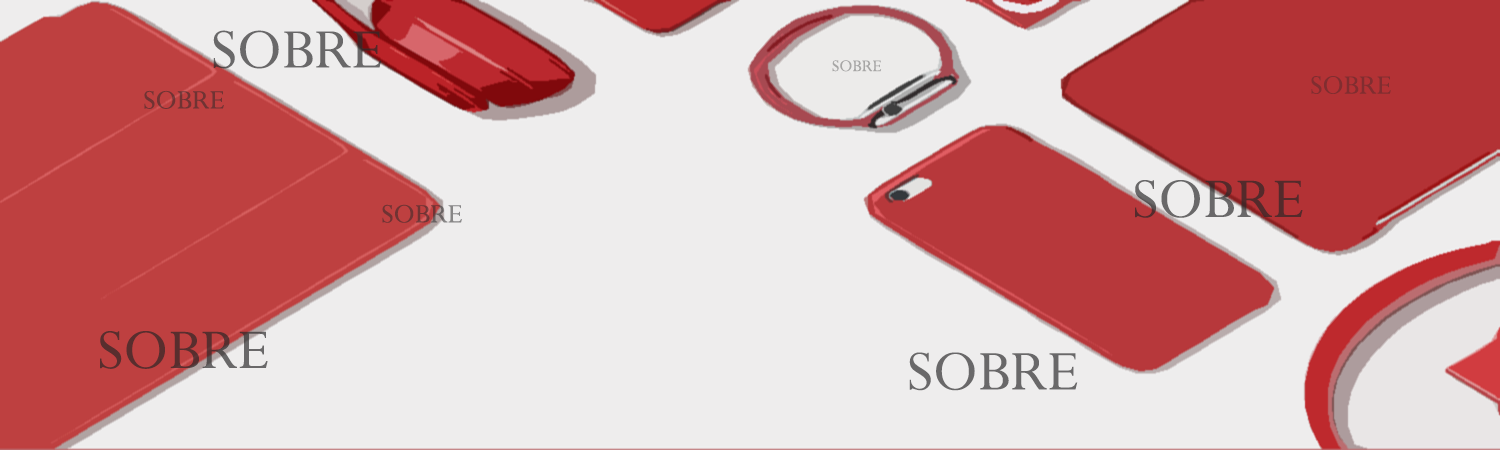
<style>
.page{position:relative;width:1500px;height:450px;background:#eeeded}
.page>*{position:absolute;margin:0}
.t1{font:62.7px "Perpetua";color:#696869}
.t2{font:18.1px "Perpetua";color:#a7a6a5}
.t3{font:29.6px "Perpetua";color:#812d30}
.t4{font:62.7px "Perpetua"}
</style>
<div class="page">
<p class="t1" style="left:213px;top:30px;width:169px;height:39px">SOBRE</p>
<p class="t2" style="left:832px;top:60px;width:50px;height:12px">SOBRE</p>
<p class="t3" style="left:1311px;top:76px;width:80px;height:18px">SOBRE</p>
<p class="t4" style="left:1135px;top:180px;width:168px;height:38px">SOBRE</p>
<p class="t4" style="left:100px;top:331px;width:168px;height:38px">SOBRE</p>
<p class="t1" style="left:909px;top:352px;width:169px;height:39px">SOBRE</p>
</div>
